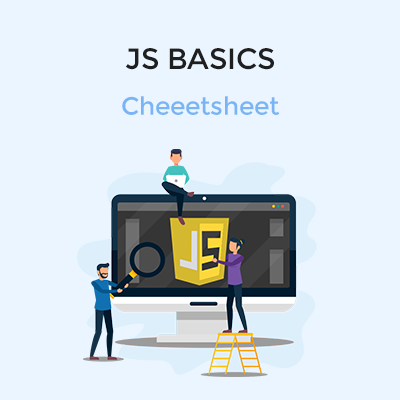
<style>
.page{position:relative;width:400px;height:400px;background:#ebf5ff}
.page>*{position:absolute;margin:0}
.t1{font:25px/45.8px "Montserrat-Regular";color:#79b5f5}
.t2{font:29.2px/45.8px "Montserrat-Regular";color:#1f1f1f}
</style>
<div class="page">
<p class="t1" style="left:122px;top:48px;width:158px;height:67px;text-align:center"><span class="t2">JS BASICS<br></span>Cheeetsheet</p>
</div>
